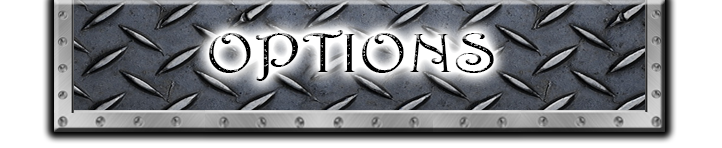
<style>
.page{position:relative;width:722px;height:148px}
.page>*{position:absolute;margin:0}
.t1{font:55.1px "Harrington";color:#000000;scale:1.31 1}
</style>
<div class="page">
<p class="t1" style="left:209px;top:30px;width:285px;height:51px">OPTIONS</p>
</div>
